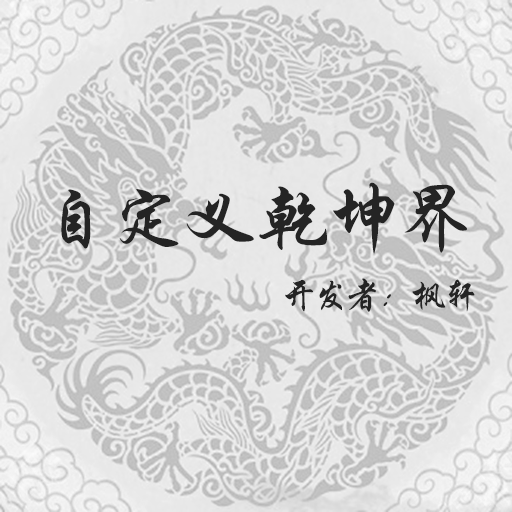
<style>
.page{position:relative;width:512px;height:512px}
.page>*{position:absolute;margin:0}
.t1{font:72px "STXingkai";color:#242424}
.t2{font:36px "STXingkai";letter-spacing:-0.1em;color:#242424}
</style>
<div class="page">
<p class="t1" style="left:61px;top:182px;width:406px;height:72px">自定义乾坤界</p>
<p class="t2" style="left:285px;top:278px;width:190px;height:34px">开发者：枫轩</p>
</div>
